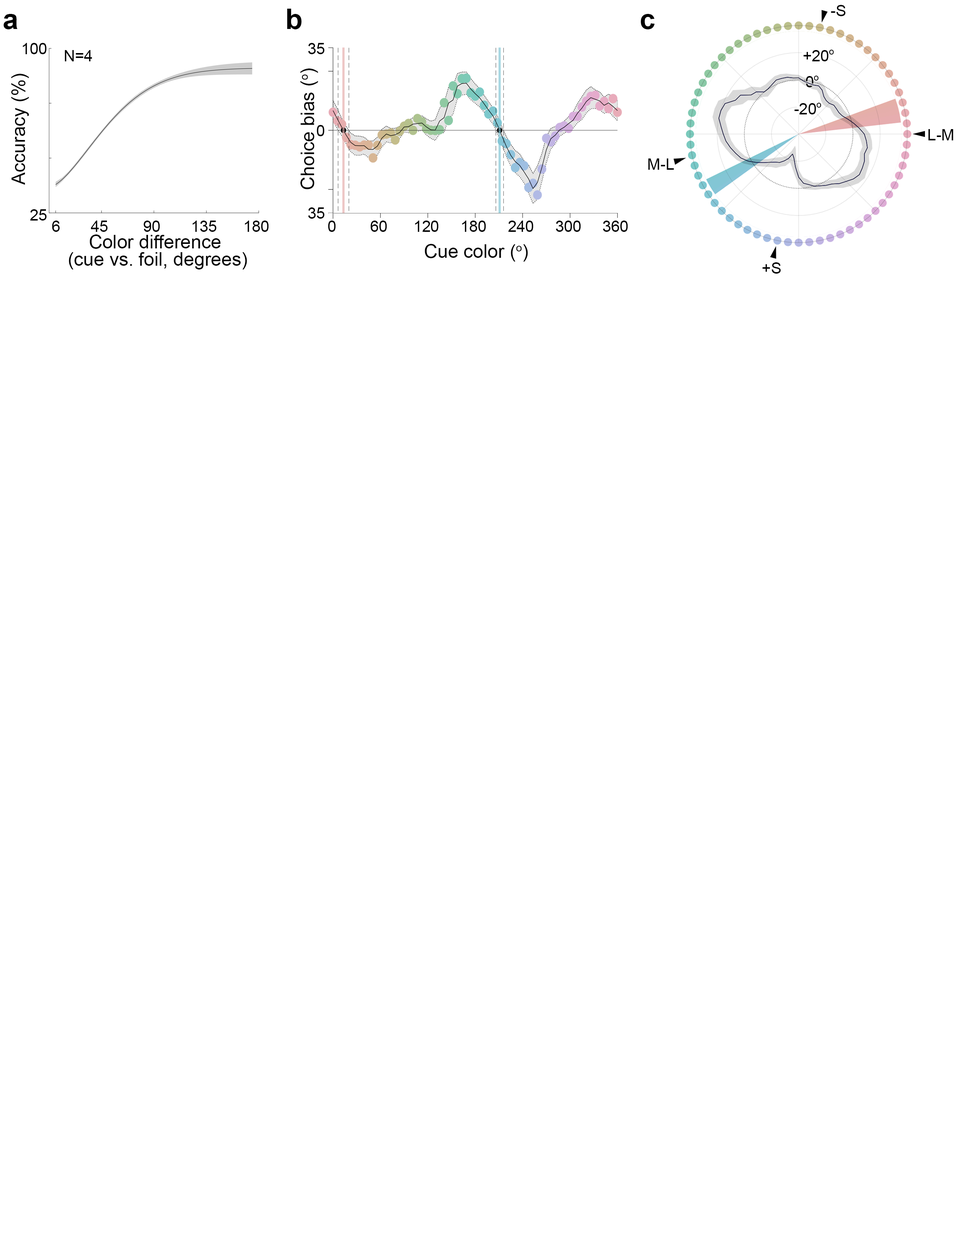
<style>
.page{position:relative;width:960px;height:1242px;background:#ffffff}
.page>*{position:absolute;margin:0}
.t1{font:15.7px "ArialMT";color:#000000}
.t2{font:28.2px "Arial-BoldMT";color:#000000}
.t3{font:15.7px/18.5px "ArialMT";color:#000000}
.t4{font:15.7px/20.5px "ArialMT";color:#000000}
.t5{font:18.8px "ArialMT";color:#000000}
.t6{font:15.7px "ArialMT";letter-spacing:-0.005em;color:#000000}
.t7{font:18.8px/17.3px "ArialMT";color:#000000}
</style>
<div class="page">
<p class="t1" style="left:831px;top:5px;width:14px;height:11px">-S</p>
<p class="t2" style="left:3px;top:9px;width:652px;height:20px">a                                  b                                           c</p>
<p class="t3" style="left:23px;top:43px;width:24px;height:178px;text-align:right">100<br><br><br><br><br><br><br><br><br>25</p>
<p class="t1" style="left:65px;top:50px;width:27px;height:11px">N=4</p>
<p class="t4" style="left:308px;top:43px;width:16px;height:176px;text-align:right">35<br><br><br><br>0<br><br><br><br>35</p>
<p class="t1" style="left:803px;top:50px;width:31px;height:11px">+20o</p>
<p class="t5" style="left:11px;top:74px;width:18px;height:111px;rotate:-90deg">Accuracy (%)</p>
<p class="t5" style="left:300px;top:69px;width:18px;height:120px;rotate:-90deg">Choice bias (o)</p>
<p class="t1" style="left:806px;top:76px;width:13px;height:11px">0o</p>
<p class="t1" style="left:794px;top:103px;width:27px;height:11px">-20o</p>
<p class="t1" style="left:928px;top:129px;width:25px;height:11px">L-M</p>
<p class="t1" style="left:648px;top:158px;width:26px;height:12px">M-L</p>
<p class="t1" style="left:52px;top:221px;width:217px;height:11px">6       45        90       135      180</p>
<p class="t6" style="left:328px;top:221px;width:300px;height:11px">0        60      120     180     240     300     360</p>
<p class="t7" style="left:69px;top:235px;width:178px;height:35px;text-align:center">Color difference <br>(cue vs. foil, degrees)</p>
<p class="t5" style="left:425px;top:244px;width:103px;height:18px">Cue color (o)</p>
<p class="t1" style="left:762px;top:262px;width:19px;height:12px">+S</p>
</div>
